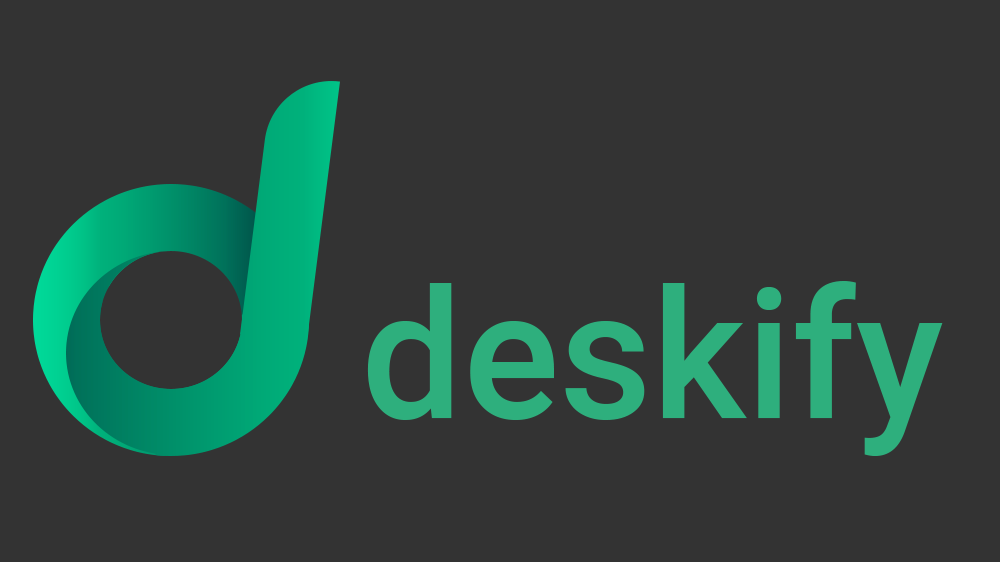
<style>
.page{position:relative;width:1000px;height:562px;background:#333333}
.page>*{position:absolute;margin:0}
.t1{font:180px "Roboto-Medium";color:#2eaf7d}
</style>
<div class="page">
<p class="t1" style="left:367px;top:281px;width:576px;height:175px">deskify</p>
</div>
